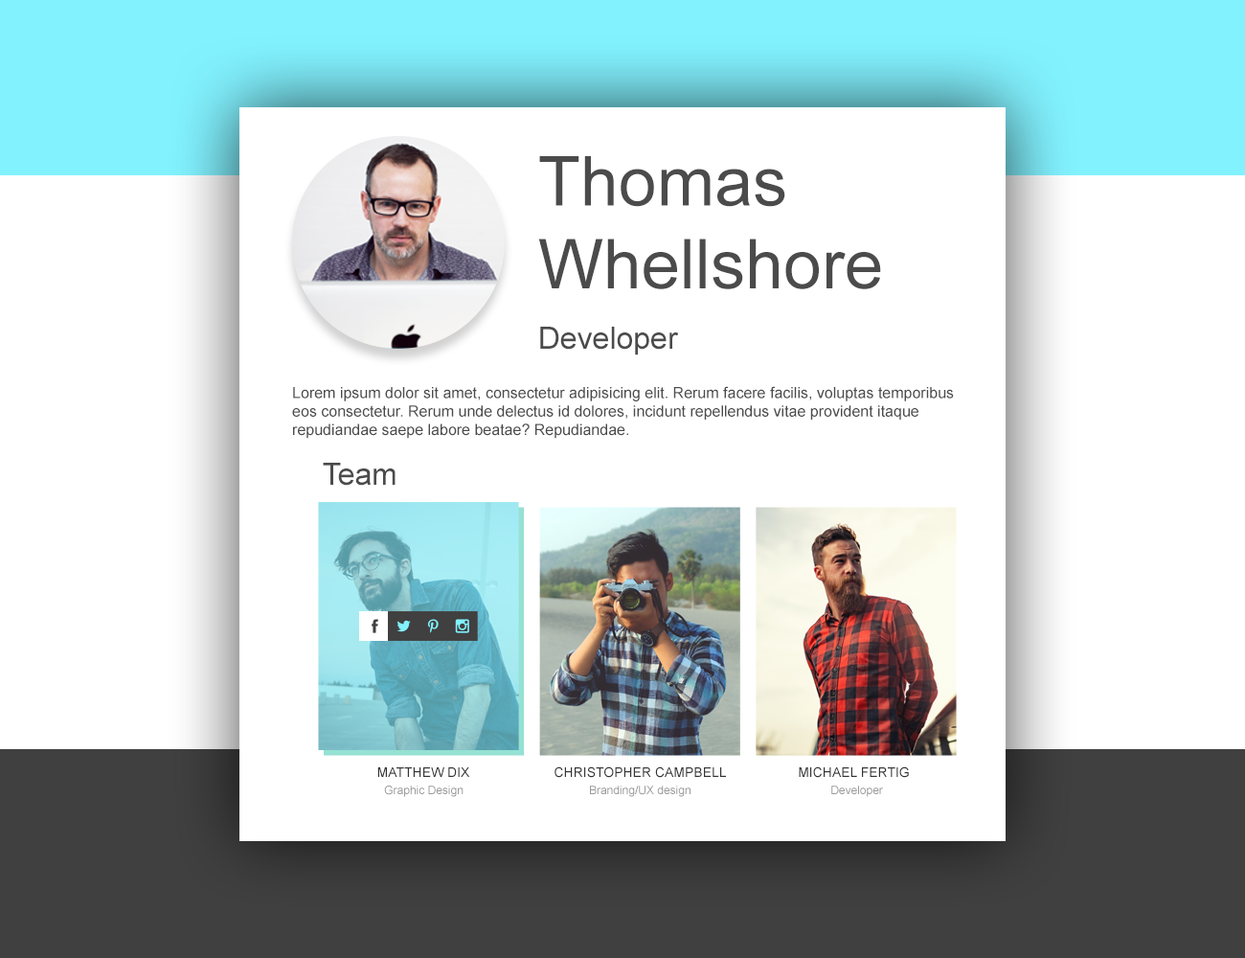
<style>
.page{position:relative;width:1245px;height:958px;background:#ffffff}
.page>*{position:absolute;margin:0}
.t1{font:69px "ArialMT";color:#4b4b4b}
.t2{font:30.6px "ArialMT";color:#4b4b4b}
.t3{font:15.3px "ArialMT";color:#4b4b4b}
.t4{font:13.4px "ArialMT";color:#333333;text-transform:uppercase}
.t5{font:11.5px "ArialMT";color:#999999}
</style>
<div class="page">
<p class="t1" style="left:538px;top:156px;width:343px;height:133px">Thomas<br>Whellshore</p>
<p class="t2" style="left:540px;top:327px;width:139px;height:28px">Developer</p>
<p class="t3" style="left:292px;top:386px;width:662px;height:53px">Lorem ipsum dolor sit amet, consectetur adipisicing elit. Rerum facere facilis, voluptas temporibus eos consectetur. Rerum unde delectus id dolores, incidunt repellendus vitae provident itaque repudiandae saepe labore beatae? Repudiandae.</p>
<p class="t2" style="left:323px;top:463px;width:73px;height:23px">Team</p>
<p class="t4" style="left:377px;top:767px;width:93px;height:10px">Matthew Dix</p>
<p class="t4" style="left:555px;top:766px;width:171px;height:12px">Christopher Campbell</p>
<p class="t4" style="left:799px;top:766px;width:110px;height:12px">Michael Fertig</p>
<p class="t5" style="left:384px;top:785px;width:80px;height:12px">Graphic Design</p>
<p class="t5" style="left:590px;top:785px;width:101px;height:12px">Branding/UX design</p>
<p class="t5" style="left:831px;top:785px;width:52px;height:12px">Developer</p>
</div>
